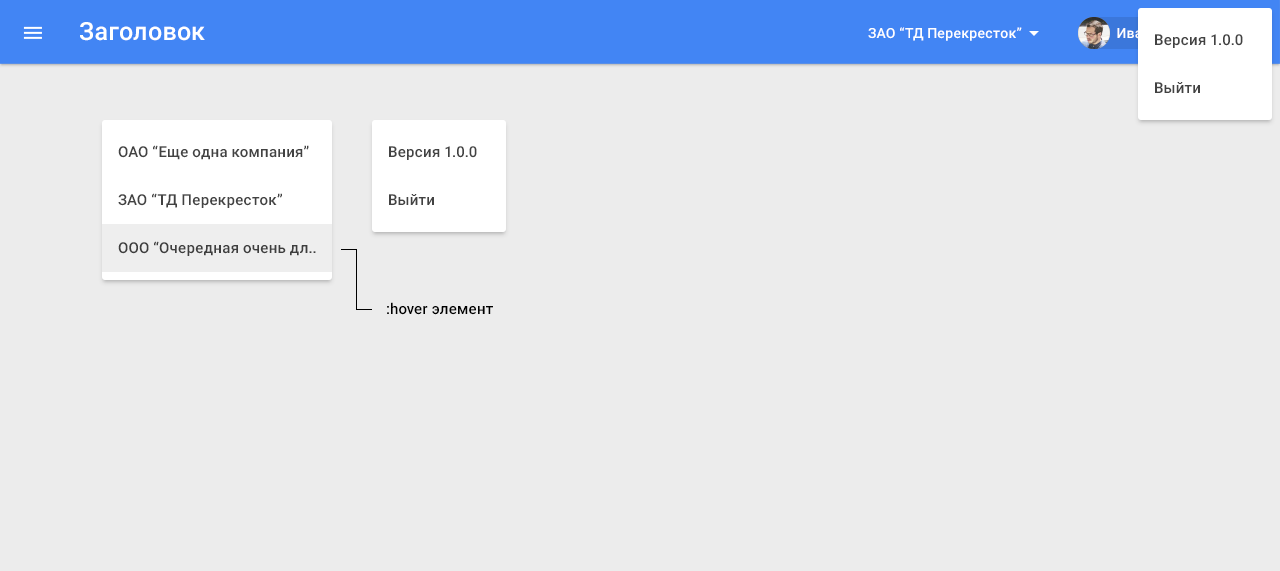
<style>
.page{position:relative;width:1280px;height:571px;background:#ececec}
.page>*{position:absolute;margin:0}
.t1{font:25px "Roboto-Medium";letter-spacing:0.01em;color:#ffffff}
.t2{font:14px "Roboto-Medium";letter-spacing:0.01em;color:#ffffff}
.t3{font:15px "Roboto-Medium";letter-spacing:0.01em;color:#424242}
.t4{font:15px "Roboto-Medium";letter-spacing:0.01em;color:#3e3e3e}
.t5{font:15px "Roboto-Medium";letter-spacing:0.01em;color:#000000}
</style>
<div class="page">
<p class="t1" style="left:80px;top:22px;width:125px;height:19px">Заголовок</p>
<p class="t2" style="left:868px;top:27px;width:154px;height:14px">ЗАО “ТД Перекресток”</p>
<p class="t3" style="left:118px;top:145px;width:191px;height:15px">ОАО “Еще одна компания”</p>
<p class="t3" style="left:389px;top:146px;width:88px;height:14px">Версия 1.0.0</p>
<p class="t3" style="left:118px;top:193px;width:164px;height:15px">ЗАО “ТД Перекресток”</p>
<p class="t3" style="left:389px;top:194px;width:45px;height:11px">Выйти</p>
<p class="t4" style="left:118px;top:241px;width:198px;height:15px">ООО “Очередная очень дл..</p>
<p class="t5" style="left:387px;top:302px;width:106px;height:13px">:hover элемент</p>
</div>
